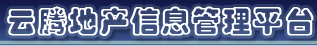
<style>
.page{position:relative;width:317px;height:46px}
.page>*{position:absolute;margin:0}
.t1{font:30px "STCaiyun";color:#ffffff;font-weight:bold}
</style>
<div class="page">
<p class="t1" style="left:7px;top:6px;width:307px;height:30px">云腾地产信息管理平台</p>
</div>
